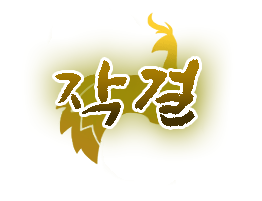
<style>
.page{position:relative;width:262px;height:201px;background:#ffffff}
.page>*{position:absolute;margin:0}
.t1{font:85.3px "SangSangRockOTF";letter-spacing:0.08em}
</style>
<div class="page">
<p class="t1" style="left:55px;top:59px;width:144px;height:68px">작걸</p>
</div>
